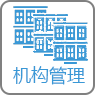
<style>
.page{position:relative;width:95px;height:95px;background:#ffffff}
.page>*{position:absolute;margin:0}
.t1{font:18px "MicrosoftYaHei";color:#3998d6}
</style>
<div class="page">
<p class="t1" style="left:13px;top:66px;width:72px;height:19px">机构管理</p>
</div>
